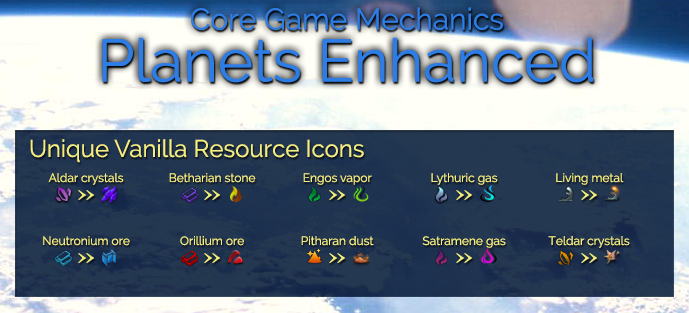
<style>
.page{position:relative;width:689px;height:313px}
.page>*{position:absolute;margin:0}
.t1{font:30px/52px "Raleway";color:#2d7de4}
.t2{font:60px/52px "Raleway";color:#2d7de4}
.t3{font:24px "Raleway";color:#f4ed81}
.t4{font:12px "Raleway";color:#f4ed81}
</style>
<div class="page">
<p class="t1" style="left:102px;top:7px;width:492px;height:76px;text-align:center">Core Game Mechanics<br><span class="t2">Planets Enhanced</span></p>
<p class="t3" style="left:30px;top:139px;width:334px;height:24px">Unique Vanilla Resource Icons</p>
<p class="t4" style="left:48px;top:173px;width:76px;height:12px">Aldar crystals</p>
<p class="t4" style="left:169px;top:173px;width:87px;height:10px">Betharian stone</p>
<p class="t4" style="left:303px;top:173px;width:69px;height:12px">Engos vapor</p>
<p class="t4" style="left:431px;top:173px;width:67px;height:12px">Lythuric gas</p>
<p class="t4" style="left:556px;top:173px;width:68px;height:12px">Living metal</p>
<p class="t4" style="left:43px;top:236px;width:87px;height:10px">Neutronium ore</p>
<p class="t4" style="left:180px;top:236px;width:64px;height:10px">Orillium ore</p>
<p class="t4" style="left:301px;top:236px;width:73px;height:10px">Pitharan dust</p>
<p class="t4" style="left:422px;top:236px;width:84px;height:12px">Satramene gas</p>
<p class="t4" style="left:548px;top:236px;width:82px;height:12px">Teldar crystals</p>
</div>
